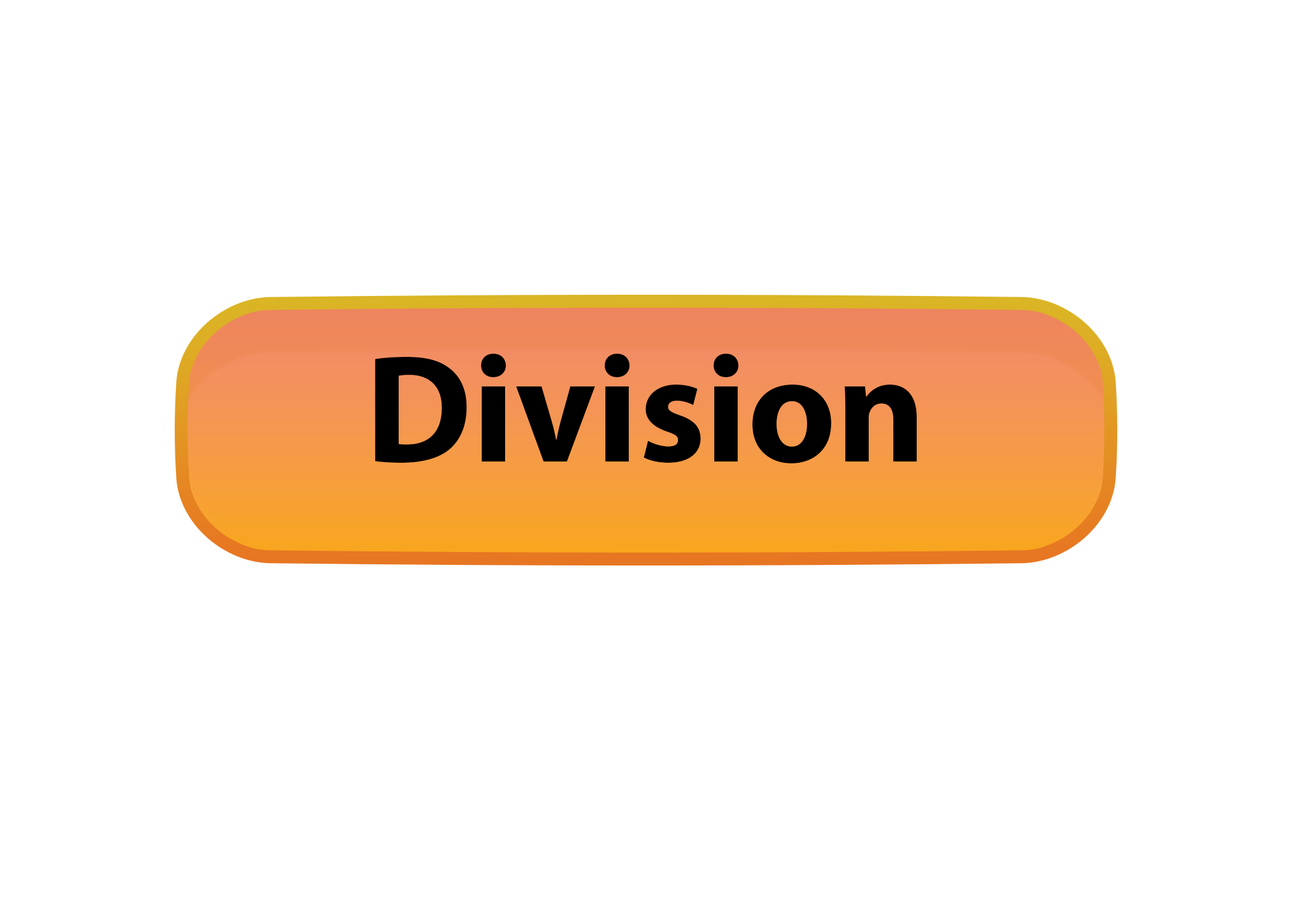
<style>
.page{position:relative;width:1292px;height:923px;background:#ffffff}
.page>*{position:absolute;margin:0}
.t1{font:153.8px "MyriadPro-Bold";color:#000000}
</style>
<div class="page">
<p class="t1" style="left:375px;top:353px;width:542px;height:110px">Division</p>
</div>
